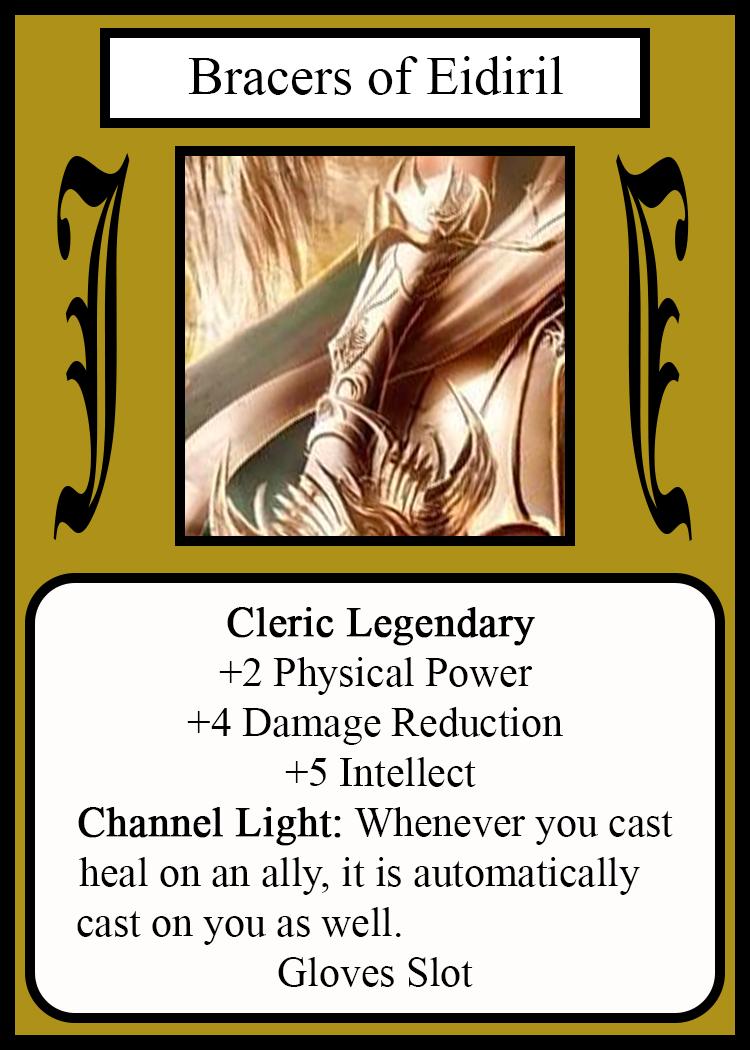
<style>
.page{position:relative;width:750px;height:1050px;background:#fffcfc}
.page>*{position:absolute;margin:0}
.t1{font:54.2px "TimesNewRomanPSMT";color:#010101}
.t2{font:450.1px "OldEnglishTextMT";color:#000000;scale:0.26 1}
.t3{font:449.7px "OldEnglishTextMT";color:#000000;scale:0.26 1}
.t4{font:41.7px "TimesNewRomanPSMT";color:#000000}
.t5{font:41.7px "TimesNewRomanPSMT";color:#000000;font-weight:bold}
</style>
<div class="page">
<p class="t1" style="left:188px;top:56px;width:375px;height:39px">Bracers of Eidiril</p>
<p class="t2" style="left:53px;top:153px;width:77px;height:387px">J</p>
<p class="t3" style="left:616px;top:154px;width:76px;height:387px;rotate:180deg">J</p>
<p class="t4" style="left:77px;top:607px;width:596px;height:380px;text-align:center"><span class="t5">Cleric Legendary<br></span>+2 Physical Power<br>+4 Damage Reduction<br> +5 Intellect<br><span class="t5">Channel Light:</span> Whenever you cast<br>heal on an ally, it is automatically   <br>cast on you as well.                          <br> Gloves Slot</p>
</div>
